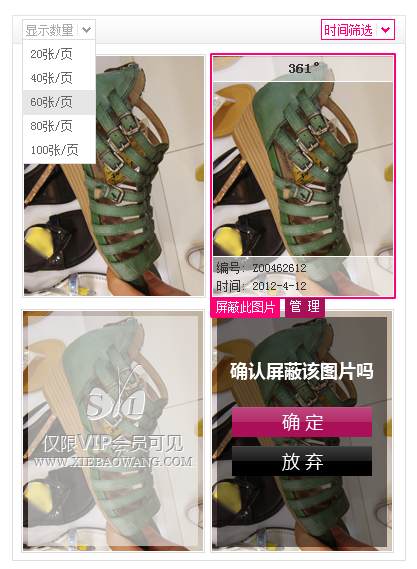
<style>
.page{position:relative;width:417px;height:569px;background:#ffffff}
.page>*{position:absolute;margin:0}
.t1{font:12px "SimSun";color:#aaaaaa}
.t2{font:12px/24px "SimSun";color:#666666}
.t3{font:14px "SimSun";color:#333333;font-weight:bold}
.t4{font:12px/18px "SimSun";color:#333333}
.t5{font:12px "SimSun";color:#ffffff}
.t6{font:18px "MicrosoftYaHei-Bold";color:#ffffff}
.t7{font:18px "MicrosoftYaHei";color:#ffffff}
.t8{font:18px "MicrosoftYaHei"}
.t9{font:20px "MicrosoftYaHei-Bold"}
.t10{font:12px "Century";text-transform:uppercase}
</style>
<div class="page">
<p class="t1" style="left:26px;top:24px;width:47px;height:12px">显示数量</p>
<p class="t2" style="left:31px;top:48px;width:47px;height:108px">20张/页<br>40张/页<br>60张/页<br>80张/页<br>100张/页</p>
<p class="t3" style="left:289px;top:62px;width:30px;height:11px">361°</p>
<p class="t4" style="left:217px;top:262px;width:89px;height:30px">编号: Z00462612<br>时间: 2012-4-12</p>
<p class="t5" style="left:216px;top:301px;width:59px;height:12px">屏蔽此图片</p>
<p class="t5" style="left:290px;top:300px;width:29px;height:12px">管 理</p>
<p class="t6" style="left:230px;top:362px;width:144px;height:18px">确认屏蔽该图片吗</p>
<p class="t7" style="left:282px;top:413px;width:41px;height:18px">确 定</p>
<p class="t8" style="left:41px;top:434px;width:142px;height:18px">仅限<span class="t9">VIP</span>会员可见</p>
<p class="t10" style="left:33px;top:457px;width:160px;height:9px">www.xiebaowang.com</p>
<p class="t7" style="left:282px;top:453px;width:41px;height:18px">放 弃</p>
</div>
